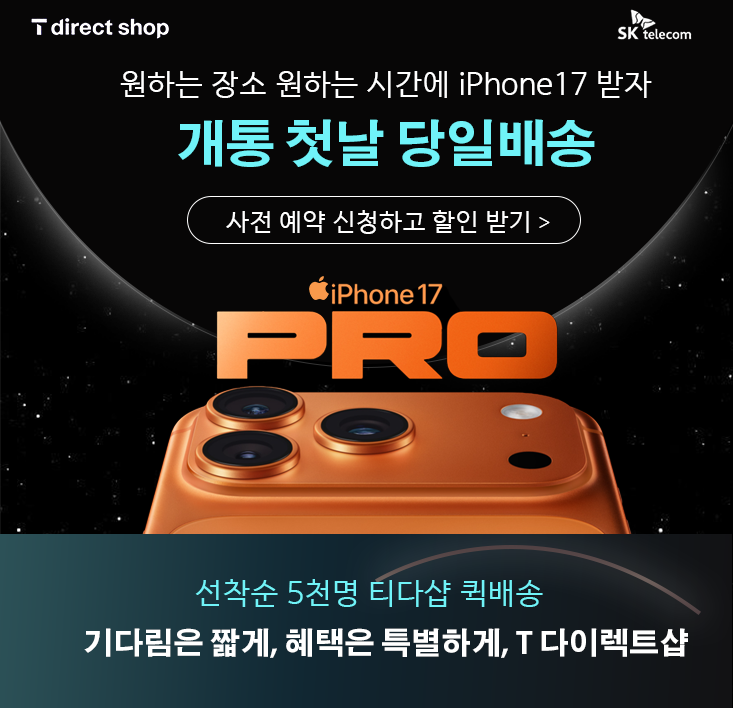
<style>
.page{position:relative;width:733px;height:708px;background:#070606}
.page>*{position:absolute;margin:0}
.t1{font:30px "HancomGothicRegular";color:#ffffff}
.t2{font:50px "AdobeGothicStd-Bold";color:#70f3f8}
.t3{font:25px "HancomGothicRegular";color:#ffffff}
.t4{font:25px "MapoGoldenPier";color:#ffffff}
.t5{font:30px "HancomGothicRegular";color:#70f3f8}
.t6{font:30px "AdobeGothicStd-Bold";color:#ffffff}
</style>
<div class="page">
<p class="t1" style="left:120px;top:71px;width:532px;height:27px">원하는 장소 원하는 시간에 iPhone17 받자</p>
<p class="t2" style="left:178px;top:119px;width:417px;height:48px">개통 첫날 당일배송</p>
<p class="t3" style="left:226px;top:210px;width:324px;height:24px">사전 예약 신청하고 할인 받기<span class="t4">＞</span></p>
<p class="t5" style="left:195px;top:579px;width:348px;height:28px">선착순 5천명 티다샵 퀵배송</p>
<p class="t6" style="left:84px;top:628px;width:604px;height:30px">기다림은 짧게, 혜택은 특별하게, T 다이렉트샵</p>
</div>
